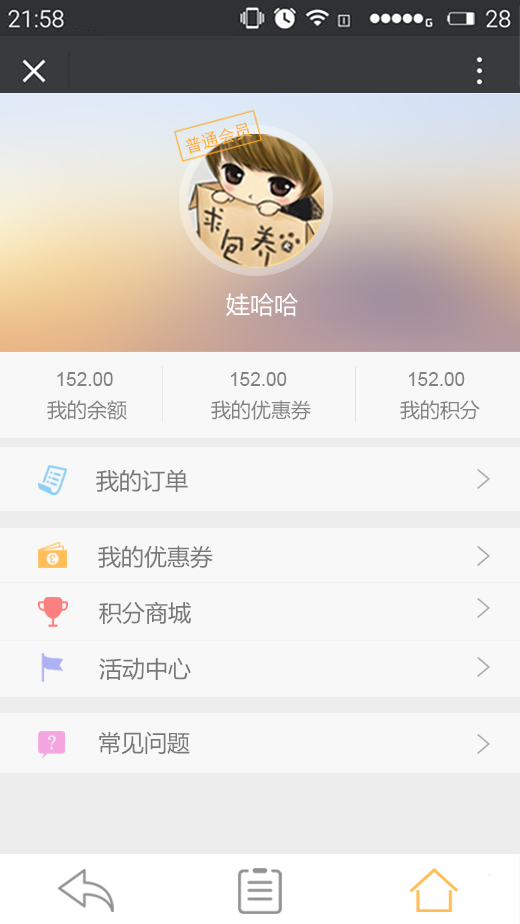
<style>
.page{position:relative;width:520px;height:924px;background:#f9f8f8}
.page>*{position:absolute;margin:0}
.t1{font:17.1px "SimHei";color:#ffad2c}
.t2{font:24px "MicrosoftYaHei";color:#ffffff}
.t3{font:19px "ArialMT";color:#828282}
.t4{font:20px "MicrosoftYaHei";color:#828282}
.t5{font:23px "MicrosoftYaHei";color:#787878}
</style>
<div class="page">
<p class="t1" style="left:185px;top:122px;width:67px;height:32px;rotate:-15deg">普通会员</p>
<p class="t2" style="left:226px;top:293px;width:72px;height:24px">娃哈哈</p>
<p class="t3" style="left:57px;top:372px;width:56px;height:14px">152.00</p>
<p class="t3" style="left:230px;top:372px;width:57px;height:14px">152.00</p>
<p class="t3" style="left:408px;top:372px;width:57px;height:14px">152.00</p>
<p class="t4" style="left:47px;top:400px;width:80px;height:20px">我的余额</p>
<p class="t4" style="left:211px;top:400px;width:100px;height:20px">我的优惠券</p>
<p class="t4" style="left:400px;top:400px;width:80px;height:20px">我的积分</p>
<p class="t5" style="left:96px;top:469px;width:92px;height:23px">我的订单</p>
<p class="t5" style="left:98px;top:545px;width:115px;height:24px">我的优惠券</p>
<p class="t5" style="left:99px;top:601px;width:92px;height:24px">积分商城</p>
<p class="t5" style="left:99px;top:657px;width:92px;height:23px">活动中心</p>
<p class="t5" style="left:99px;top:731px;width:91px;height:24px">常见问题</p>
</div>
